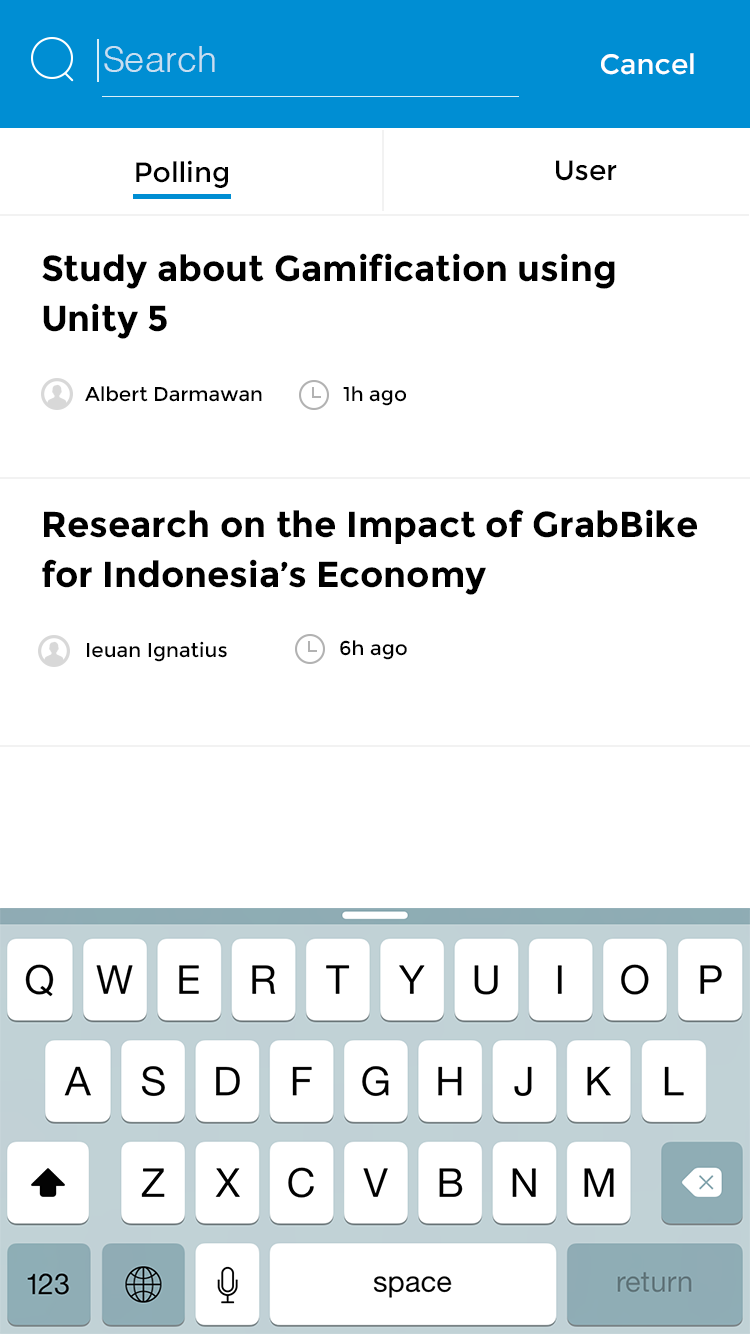
<style>
.page{position:relative;width:750px;height:1334px;background:#ffffff}
.page>*{position:absolute;margin:0}
.t1{font:36px "Helvetica-Light";color:#c7dff1}
.t2{font:28px "Montserrat-Regular";color:#ffffff}
.t3{font:28px "Montserrat-Regular";color:#000000}
.t4{font:36px/50px "Montserrat-Bold";color:#000000}
.t5{font:20px "Montserrat-Regular";color:#000000}
</style>
<div class="page">
<p class="t1" style="left:104px;top:46px;width:111px;height:26px">Search</p>
<p class="t2" style="left:601px;top:53px;width:93px;height:22px">Cancel</p>
<p class="t3" style="left:136px;top:160px;width:92px;height:28px">Polling</p>
<p class="t3" style="left:556px;top:160px;width:61px;height:21px">User</p>
<p class="t4" style="left:42px;top:253px;width:573px;height:86px">Study about Gamification using <br>Unity 5</p>
<p class="t5" style="left:85px;top:386px;width:177px;height:16px">Albert Darmawan</p>
<p class="t5" style="left:343px;top:386px;width:63px;height:20px">1h ago</p>
<p class="t4" style="left:42px;top:509px;width:655px;height:86px">Research on the Impact of GrabBike<br>for Indonesia’s Economy</p>
<p class="t5" style="left:87px;top:641px;width:140px;height:21px">Ieuan Ignatius</p>
<p class="t5" style="left:340px;top:640px;width:67px;height:20px">6h ago</p>
</div>
